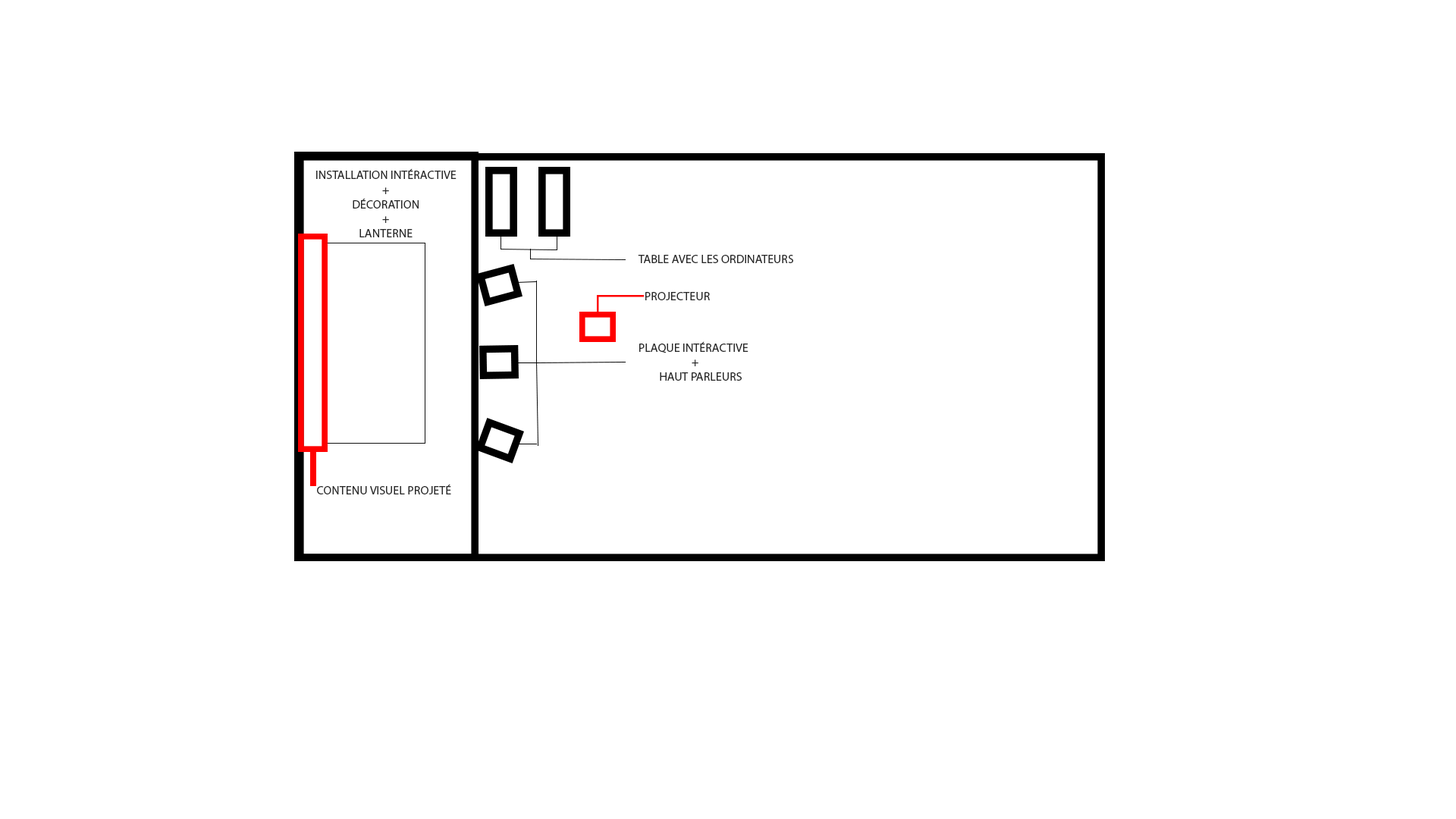
<style>
.page{position:relative;width:1456px;height:819px;background:#ffffff}
.page>*{position:absolute;margin:0}
.t1{font:12.1px "MyriadPro-Regular";color:#282828}
</style>
<div class="page">
<p class="t1" style="left:316px;top:168px;width:141px;height:69px;text-align:center">INSTALLATION INTÉRACTIVE +<br>DÉCORATION<br>+ <br>LANTERNE</p>
<p class="t1" style="left:638px;top:255px;width:155px;height:8px">TABLE AVEC LES ORDINATEURS</p>
<p class="t1" style="left:645px;top:292px;width:65px;height:8px">PROJECTEUR</p>
<p class="t1" style="left:639px;top:341px;width:109px;height:40px">PLAQUE INTÉRACTIVE  <br>           +<br>HAUT PARLEURS</p>
<p class="t1" style="left:317px;top:484px;width:134px;height:10px;text-align:center">CONTENU VISUEL PROJETÉ<br><br>TÉ</p>
</div>
